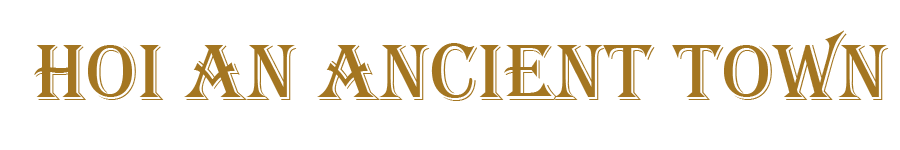
<style>
.page{position:relative;width:900px;height:150px;background:#ffffff}
.page>*{position:absolute;margin:0}
.t1{font:83px "Algerian";color:#a47621}
</style>
<div class="page">
<p class="t1" style="left:34px;top:30px;width:855px;height:71px">HOI AN ANCIENT TOWN</p>
</div>
